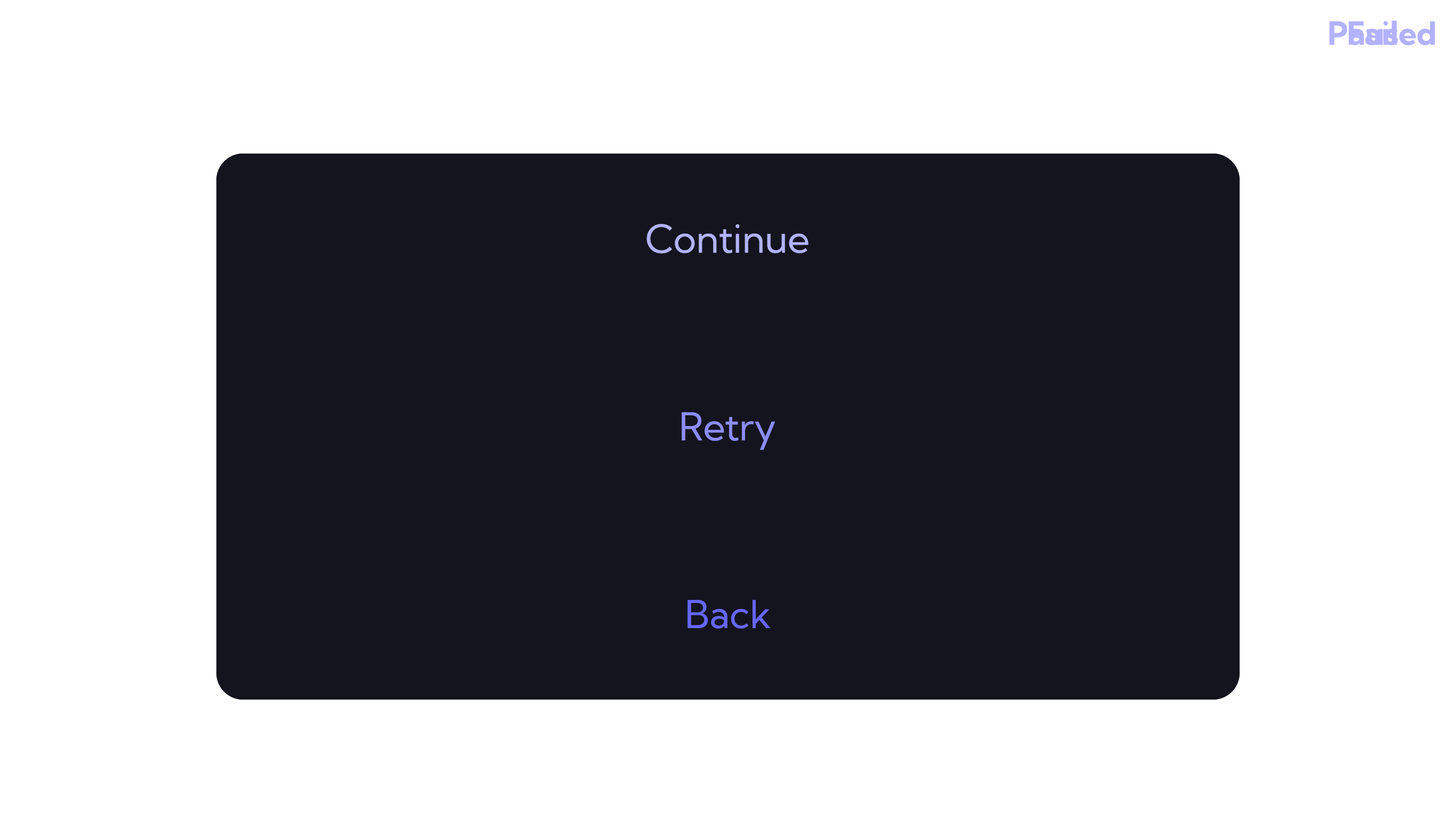
<style>
.page{position:relative;width:1456px;height:819px;background:#ffffff}
.page>*{position:absolute;margin:0}
.t1{font:32px "KumbhSans-Bold";color:#b3b2ff}
.t2{font:38.4px "KumbhSans-Regular";color:#b3b2ff}
.t3{font:38.4px "KumbhSans-Regular";color:#8c8cff}
.t4{font:38.4px "KumbhSans-Regular";color:#6666ff}
</style>
<div class="page">
<p class="t1" style="left:1329px;top:21px;width:107px;height:24px">Paused</p>
<p class="t1" style="left:1349px;top:20px;width:87px;height:25px">Failed</p>
<p class="t2" style="left:647px;top:224px;width:162px;height:30px">Continue</p>
<p class="t3" style="left:682px;top:412px;width:94px;height:38px">Retry</p>
<p class="t4" style="left:688px;top:600px;width:83px;height:28px">Back</p>
</div>
